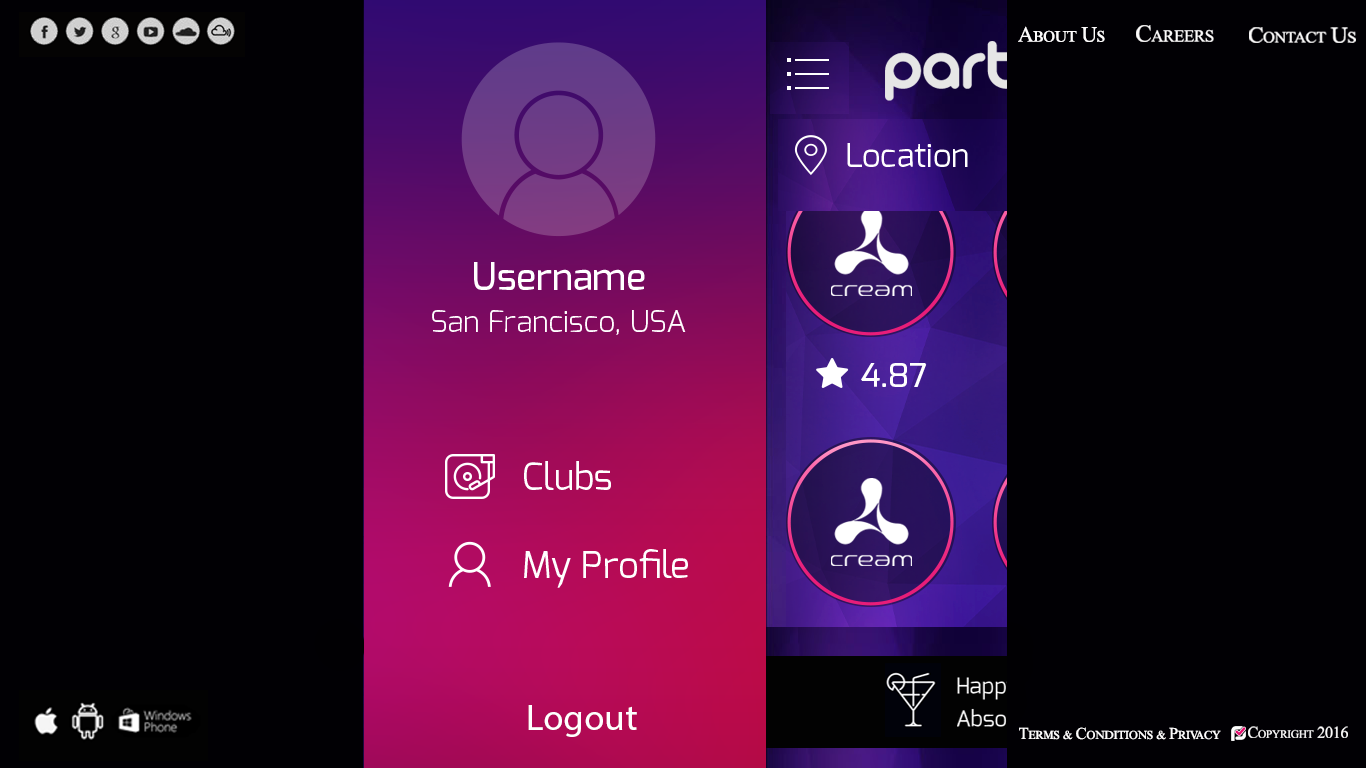
<style>
.page{position:relative;width:1366px;height:768px;background:#010004}
.page>*{position:absolute;margin:0}
.t1{font:21.9px "TimesNewRomanPSMT";letter-spacing:-0.025em;color:#fdfcfc;font-variant:small-caps}
.t2{font:24.3px "TimesNewRomanPSMT";letter-spacing:-0.025em;color:#fdfcfc;font-variant:small-caps}
.t3{font:22.2px "TimesNewRomanPSMT";letter-spacing:-0.025em;color:#fdfcfc;font-variant:small-caps;scale:1.05 1}
.t4{font:38px "Exo-Medium";color:#ffffff}
.t5{font:30px "Exo-Light";color:#ffffff}
.t6{font:37px "Exo-Regular";color:#ffffff}
.t7{font:37px "MyriadPro-Regular";color:#ffffff}
.t8{font:16.3px "TimesNewRomanPSMT";letter-spacing:-0.025em;color:#fdfcfc;font-variant:small-caps}
.t9{font:16.5px "TimesNewRomanPSMT";letter-spacing:-0.025em;color:#fdfcfc;font-variant:small-caps}
</style>
<div class="page">
<p class="t1" style="left:1018px;top:26px;width:87px;height:16px">About Us</p>
<p class="t2" style="left:1136px;top:25px;width:78px;height:17px">Careers</p>
<p class="t3" style="left:1249px;top:27px;width:107px;height:16px">Contact Us</p>
<p class="t4" style="left:474px;top:262px;width:171px;height:28px">Username</p>
<p class="t5" style="left:432px;top:310px;width:254px;height:25px">San Francisco, USA</p>
<p class="t6" style="left:524px;top:461px;width:87px;height:29px">Clubs</p>
<p class="t6" style="left:524px;top:549px;width:164px;height:39px">My Profile</p>
<p class="t7" style="left:528px;top:705px;width:109px;height:32px">Logout</p>
<p class="t8" style="left:1248px;top:726px;width:100px;height:12px">Copyright 2016</p>
<p class="t9" style="left:1019px;top:727px;width:202px;height:13px">Terms &amp; Conditions &amp; Privacy</p>
</div>
